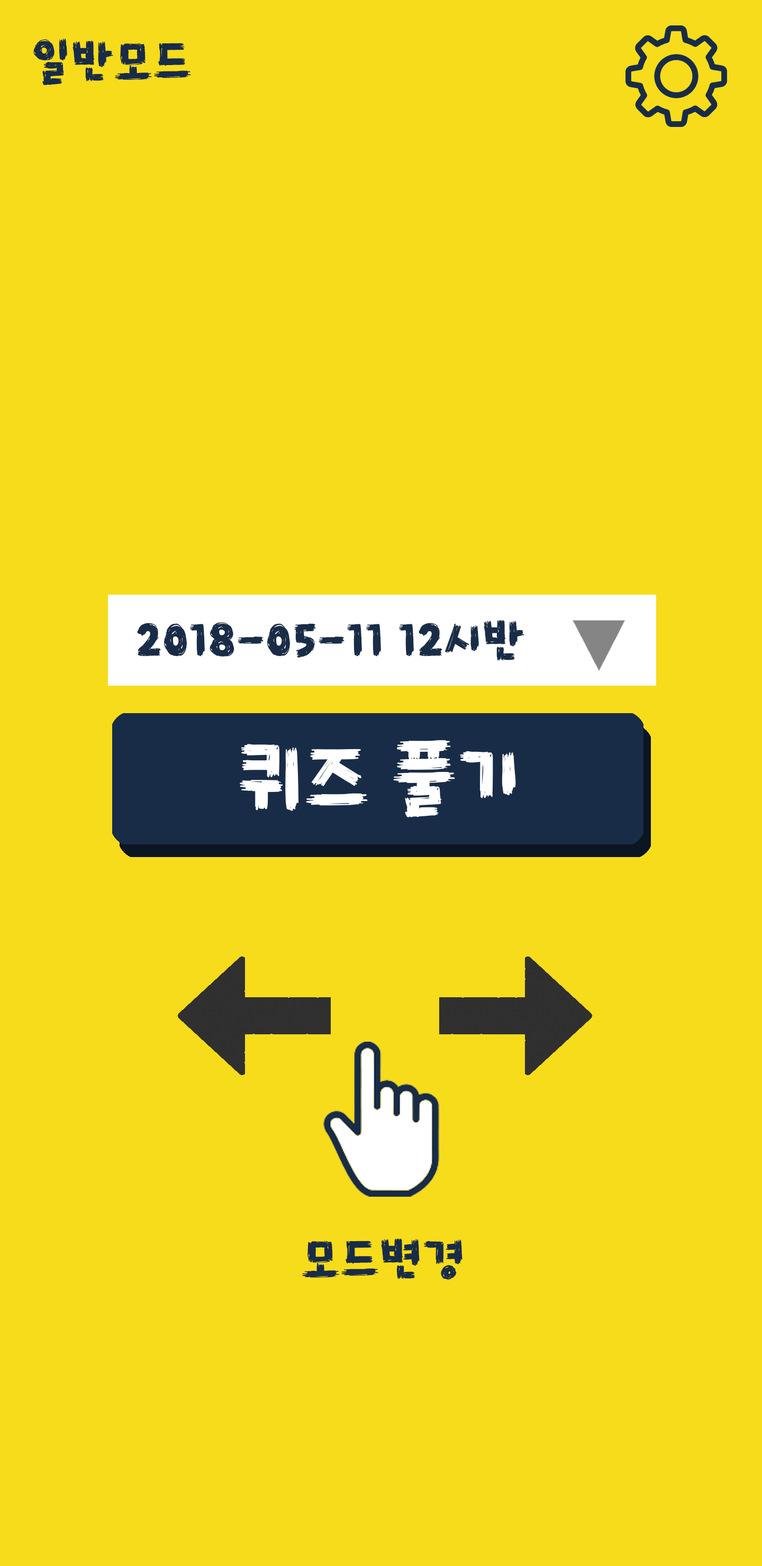
<style>
.page{position:relative;width:762px;height:1566px;background:#f7dc1b}
.page>*{position:absolute;margin:0}
.t1{font:47.6px "TTYeonpilsketchR";color:#192c47}
</style>
<div class="page">
<p class="t1" style="left:33px;top:38px;width:158px;height:47px">일반모드</p>
<p class="t1" style="left:137px;top:619px;width:387px;height:42px">2018-05-11 12시반</p>
<p class="t1" style="left:302px;top:1238px;width:160px;height:41px">모드변경</p>
</div>
